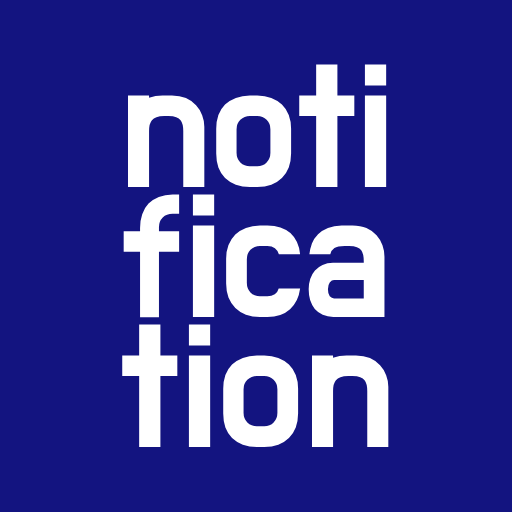
<style>
.page{position:relative;width:512px;height:512px;background:#131480}
.page>*{position:absolute;margin:0}
.t1{font:180px/130px "DoHyeon-Regular";color:#ffffff}
</style>
<div class="page">
<p class="t1" style="left:122px;top:64px;width:267px;height:383px">noti<br>fica<br>tion</p>
</div>
